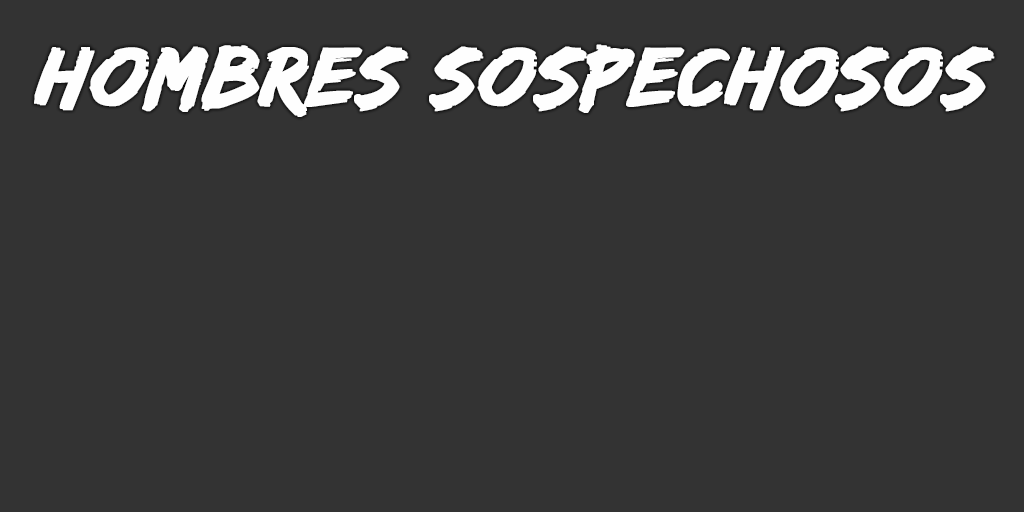
<style>
.page{position:relative;width:1024px;height:512px;background:#333333}
.page>*{position:absolute;margin:0}
.t1{font:87px "EdoSZ";color:#fefefe;font-weight:bold;font-style:italic;scale:1.05 1}
</style>
<div class="page">
<p class="t1" style="left:34px;top:44px;width:961px;height:73px">hombreS sospechosoS</p>
</div>
